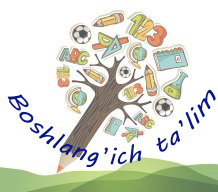
<style>
.page{position:relative;width:218px;height:192px;background:#ffffff}
.page>*{position:absolute;margin:0}
.t1{font:24px/34.7px "MVBoli";color:#06168d;scale:0.87 1}
</style>
<div class="page">
<p class="t1" style="left:7px;top:89px;width:209px;height:79px">Boshlang’ich ta’lim</p>
</div>
